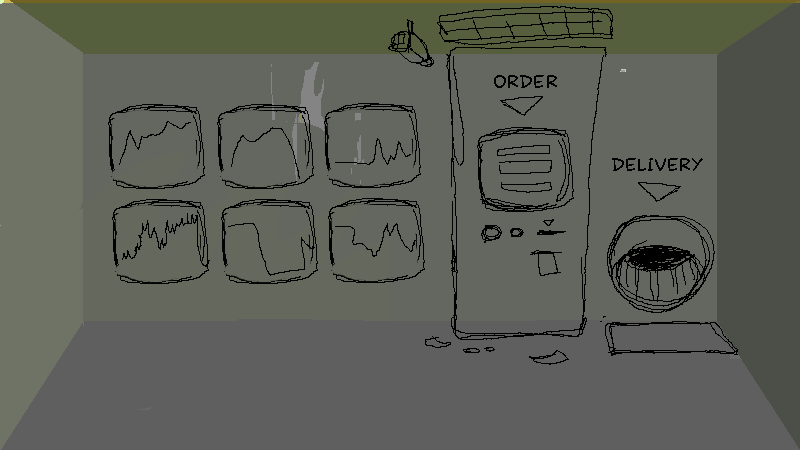
<style>
.page{position:relative;width:800px;height:450px;background:#646660}
.page>*{position:absolute;margin:0}
.t1{font:17.9px "laCartoonerie";color:#000000}
</style>
<div class="page">
<p class="t1" style="left:494px;top:75px;width:63px;height:13px">ORDER</p>
<p class="t1" style="left:612px;top:158px;width:91px;height:13px">DELIVERY</p>
</div>
